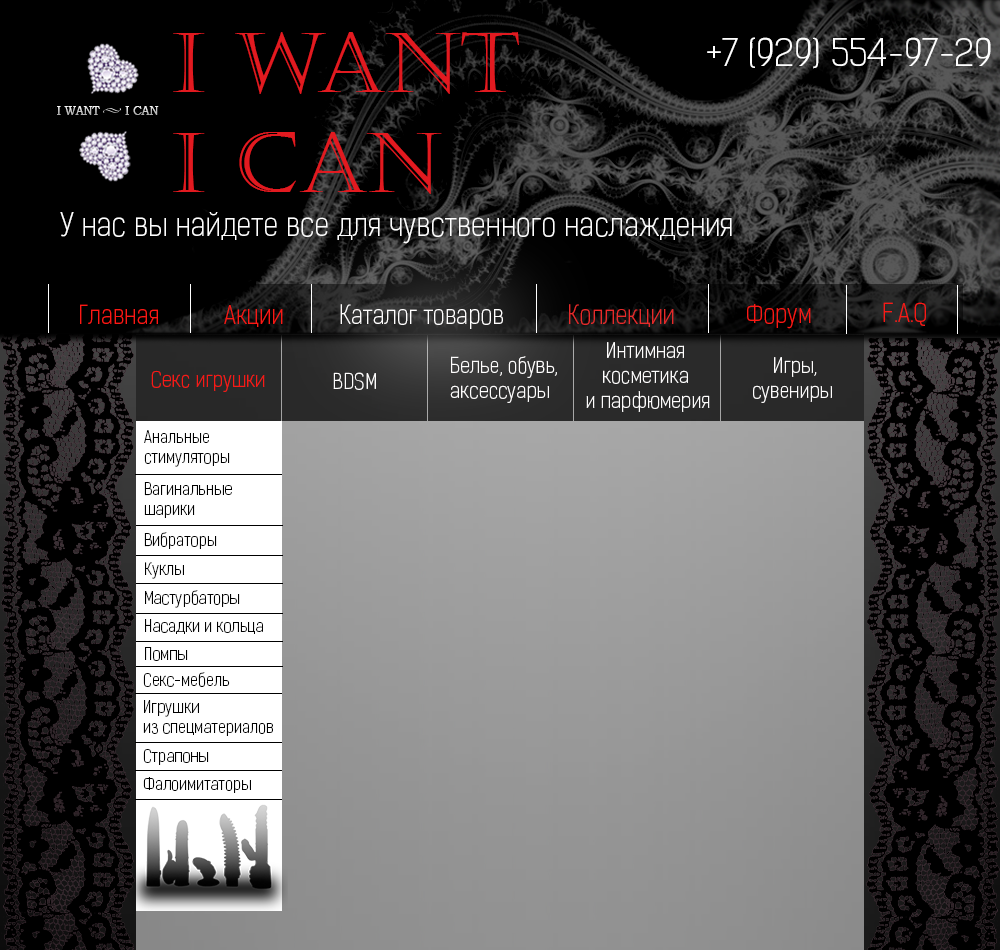
<style>
.page{position:relative;width:1000px;height:950px;background:#000000}
.page>*{position:absolute;margin:0}
.t1{font:83.3px "Castellar";color:#e21a20}
.t2{font:36.3px "KelsonSans-LightRU";color:#fefefe;scale:1.07 1}
.t3{font:12.9px "BookmanOldStyle";scale:0.9 1}
.t4{font:31.2px "KelsonSans-LightRU";color:#fefefe}
.t5{font:25px "KelsonSans-LightRU";color:#fa1915}
.t6{font:25px "KelsonSans-LightRU";color:#fffefe}
.t7{font:25px "KelsonSans-LightRU";color:#e62b2b}
.t8{font:20.8px "KelsonSans-LightRU";color:#fffefe}
.t9{font:20.8px "KelsonSans-LightRU";color:#fa1915}
.t10{font:16.7px "KelsonSans-LightRU";color:#000000}
</style>
<div class="page">
<p class="t1" style="left:173px;top:32px;width:346px;height:162px">I WANT<br>I CAN</p>
<p class="t2" style="left:707px;top:37px;width:284px;height:32px">+7 (929) 554-97-29</p>
<p class="t3" style="left:57px;top:106px;width:102px;height:9px">I WANT       I CAN</p>
<p class="t4" style="left:60px;top:212px;width:672px;height:32px">У нас вы найдете все для чувственного наслаждения</p>
<p class="t5" style="left:80px;top:304px;width:78px;height:20px">Главная</p>
<p class="t5" style="left:224px;top:305px;width:59px;height:22px">Акции</p>
<p class="t6" style="left:340px;top:304px;width:163px;height:25px">Каталог товаров</p>
<p class="t7" style="left:569px;top:304px;width:105px;height:23px">Коллекции</p>
<p class="t5" style="left:747px;top:304px;width:64px;height:25px">Форум</p>
<p class="t5" style="left:883px;top:302px;width:43px;height:24px">F.A.Q</p>
<p class="t8" style="left:586px;top:342px;width:124px;height:70px;text-align:center">Интимная <br>косметика <br>и парфюмерия</p>
<p class="t8" style="left:450px;top:356px;width:107px;height:47px">Белье, обувь,<br>аксессуары</p>
<p class="t8" style="left:753px;top:357px;width:79px;height:46px;text-align:center">Игры,<br>сувениры</p>
<p class="t9" style="left:151px;top:370px;width:114px;height:22px">Секс игрушки</p>
<p class="t8" style="left:333px;top:372px;width:43px;height:18px">BDSM</p>
<p class="t10" style="left:144px;top:430px;width:86px;height:37px">Анальные <br>стимуляторы</p>
<p class="t10" style="left:144px;top:482px;width:88px;height:36px">Вагинальные <br>шарики</p>
<p class="t10" style="left:144px;top:532px;width:73px;height:17px">Вибраторы</p>
<p class="t10" style="left:145px;top:562px;width:39px;height:17px">Куклы</p>
<p class="t10" style="left:145px;top:590px;width:95px;height:18px">Мастурбаторы</p>
<p class="t10" style="left:145px;top:619px;width:118px;height:15px">Насадки и кольца</p>
<p class="t10" style="left:145px;top:647px;width:43px;height:14px">Помпы</p>
<p class="t10" style="left:143px;top:672px;width:87px;height:15px">Секс-мебель</p>
<p class="t10" style="left:143px;top:700px;width:130px;height:36px">Игрушки <br>из спецматериалов</p>
<p class="t10" style="left:143px;top:749px;width:66px;height:16px">Страпоны</p>
<p class="t10" style="left:143px;top:777px;width:108px;height:16px">Фалоимитаторы</p>
</div>
